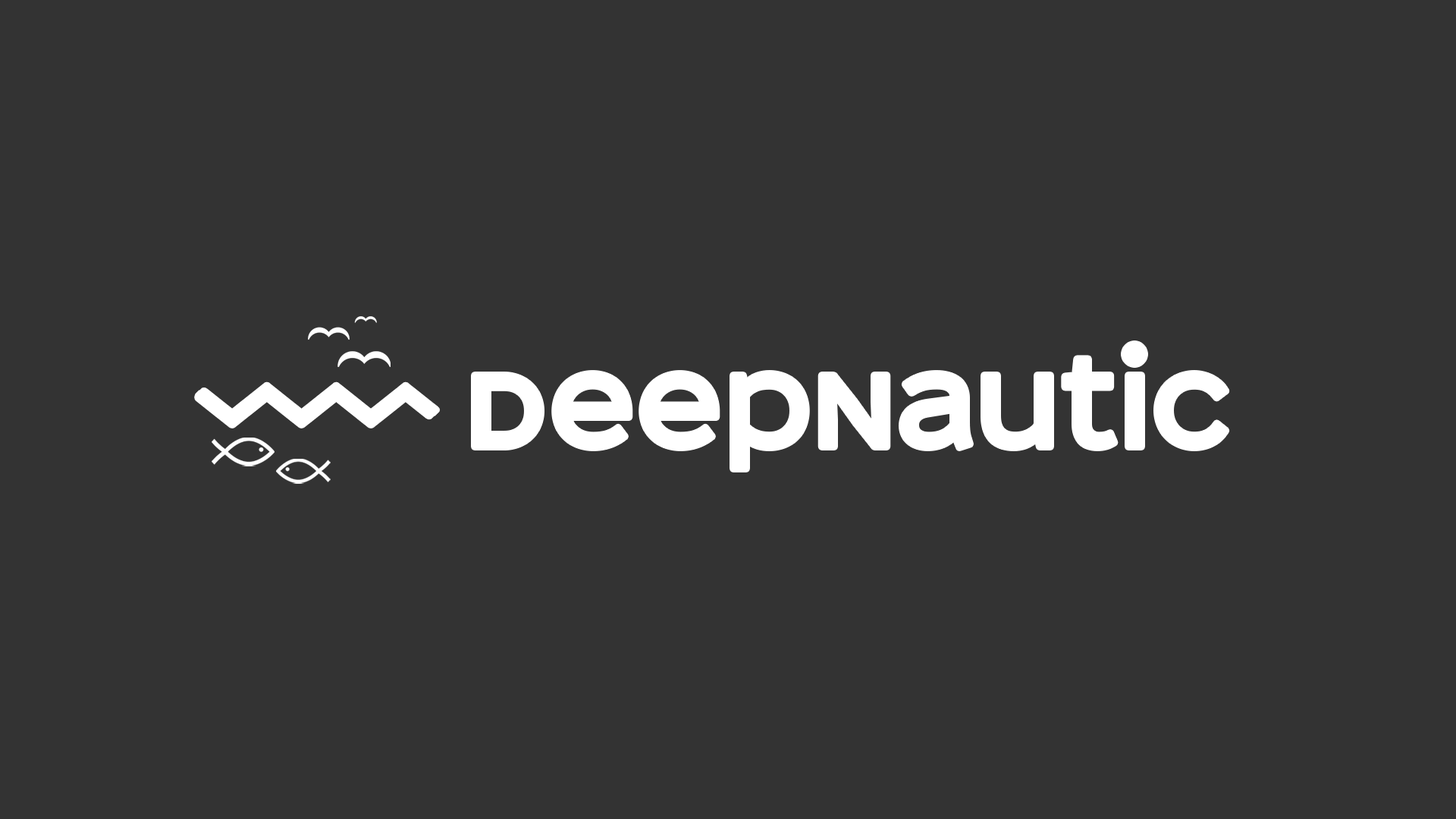
<style>
.page{position:relative;width:1456px;height:819px;background:#333333}
.page>*{position:absolute;margin:0}
.t1{font:136.5px "Affect-Bold";color:#ffffff}
</style>
<div class="page">
<p class="t1" style="left:473px;top:343px;width:755px;height:127px">DeepNautiс</p>
</div>
